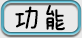
<style>
.page{position:relative;width:82px;height:38px;background:#eaeaea}
.page>*{position:absolute;margin:0}
.t1{font:29px "FZMWJW--GB1-0";color:#000000}
</style>
<div class="page">
<p class="t1" style="left:15px;top:4px;width:50px;height:27px">功能</p>
</div>
